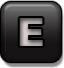
<style>
.page{position:relative;width:64px;height:68px}
.page>*{position:absolute;margin:0}
.t1{font:38.1px "Arial-Black"}
</style>
<div class="page">
<p class="t1" style="left:19px;top:18px;width:24px;height:28px">E</p>
</div>
